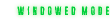
<style>
.page{position:relative;width:110px;height:20px;background:#ffffff}
.page>*{position:absolute;margin:0}
.t1{font:12px "Sunzoomspark";color:#00d03b}
</style>
<div class="page">
<p class="t1" style="left:17px;top:6px;width:92px;height:10px">W I N D O W E D  M O D E</p>
</div>
